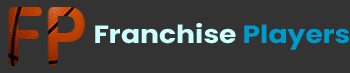
<style>
.page{position:relative;width:350px;height:73px;background:#333333}
.page>*{position:absolute;margin:0}
.t1{font:25px "Poppins-Bold";color:#ccffff;scale:1.13 1}
.t2{font:25px "Poppins-Bold";color:#0099cc;scale:1.13 1}
</style>
<div class="page">
<p class="t1" style="left:95px;top:23px;width:254px;height:27px">Franchise <span class="t2">Players</span></p>
</div>
